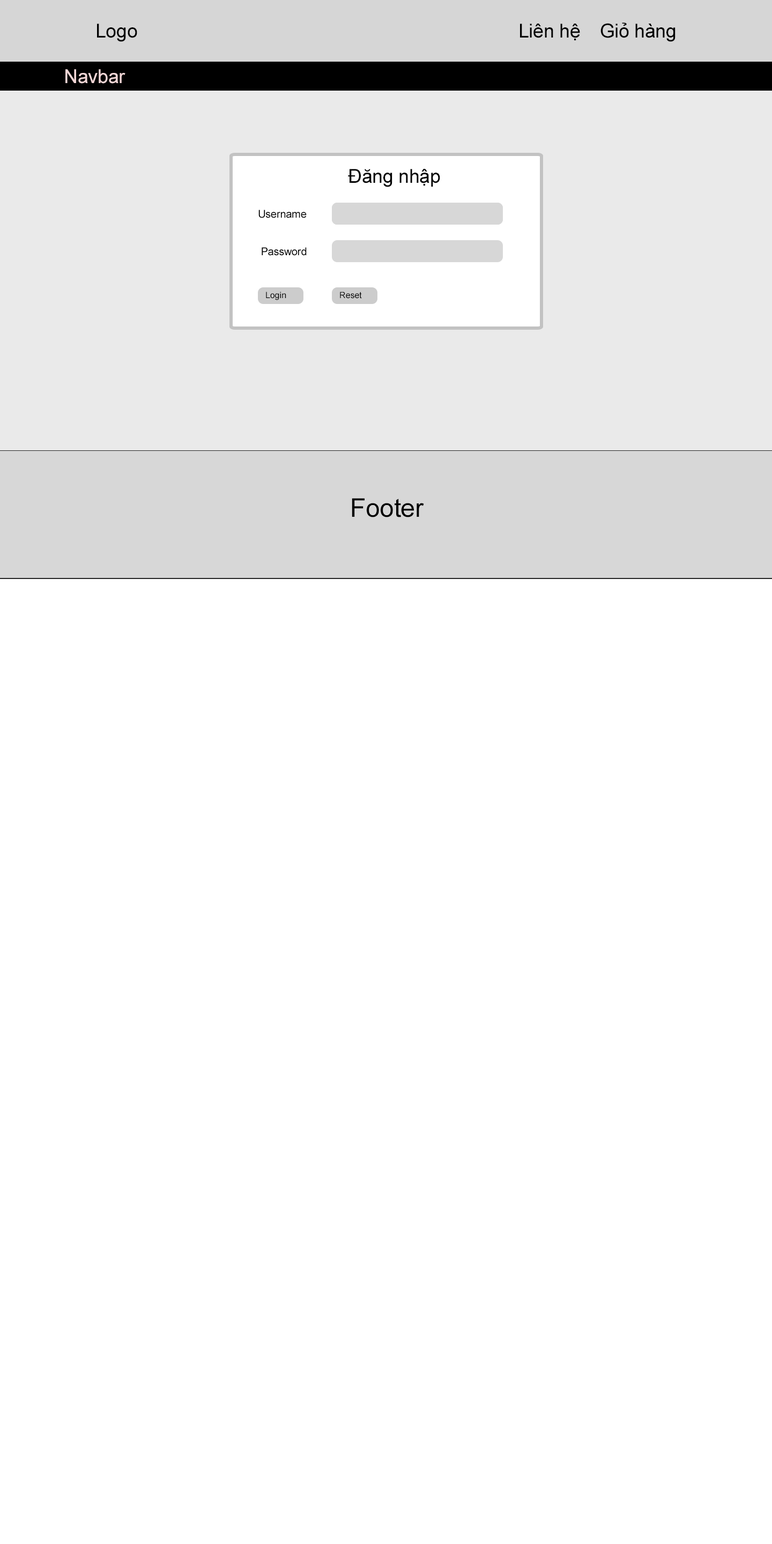
<style>
.page{position:relative;width:772px;height:1544px;background:#ffffff}
.page>*{position:absolute;margin:0}
.t1{font:19.3px "ArialMT";letter-spacing:-0.01em;color:#000000}
.t2{font:19.3px "ArialMT";letter-spacing:-0.01em;color:#f1d6d6}
.t3{font:10.7px "ArialMT";letter-spacing:-0.01em;color:#000000}
.t4{font:8.6px "ArialMT";letter-spacing:-0.01em;color:#000000}
.t5{font:25.7px "ArialMT";letter-spacing:-0.01em;color:#000000}
</style>
<div class="page">
<p class="t1" style="left:97px;top:24px;width:40px;height:18px">Logo</p>
<p class="t1" style="left:520px;top:24px;width:60px;height:17px">Liên hệ</p>
<p class="t1" style="left:601px;top:23px;width:75px;height:19px">Giỏ hàng</p>
<p class="t2" style="left:65px;top:69px;width:60px;height:15px">Navbar</p>
<p class="t1" style="left:348px;top:169px;width:92px;height:18px">Đăng nhập</p>
<p class="t3" style="left:258px;top:210px;width:49px;height:8px">Username</p>
<p class="t3" style="left:262px;top:247px;width:45px;height:9px">Password</p>
<p class="t4" style="left:266px;top:292px;width:20px;height:8px">Login</p>
<p class="t4" style="left:340px;top:292px;width:22px;height:7px">Reset</p>
<p class="t5" style="left:352px;top:498px;width:72px;height:19px">Footer</p>
</div>
